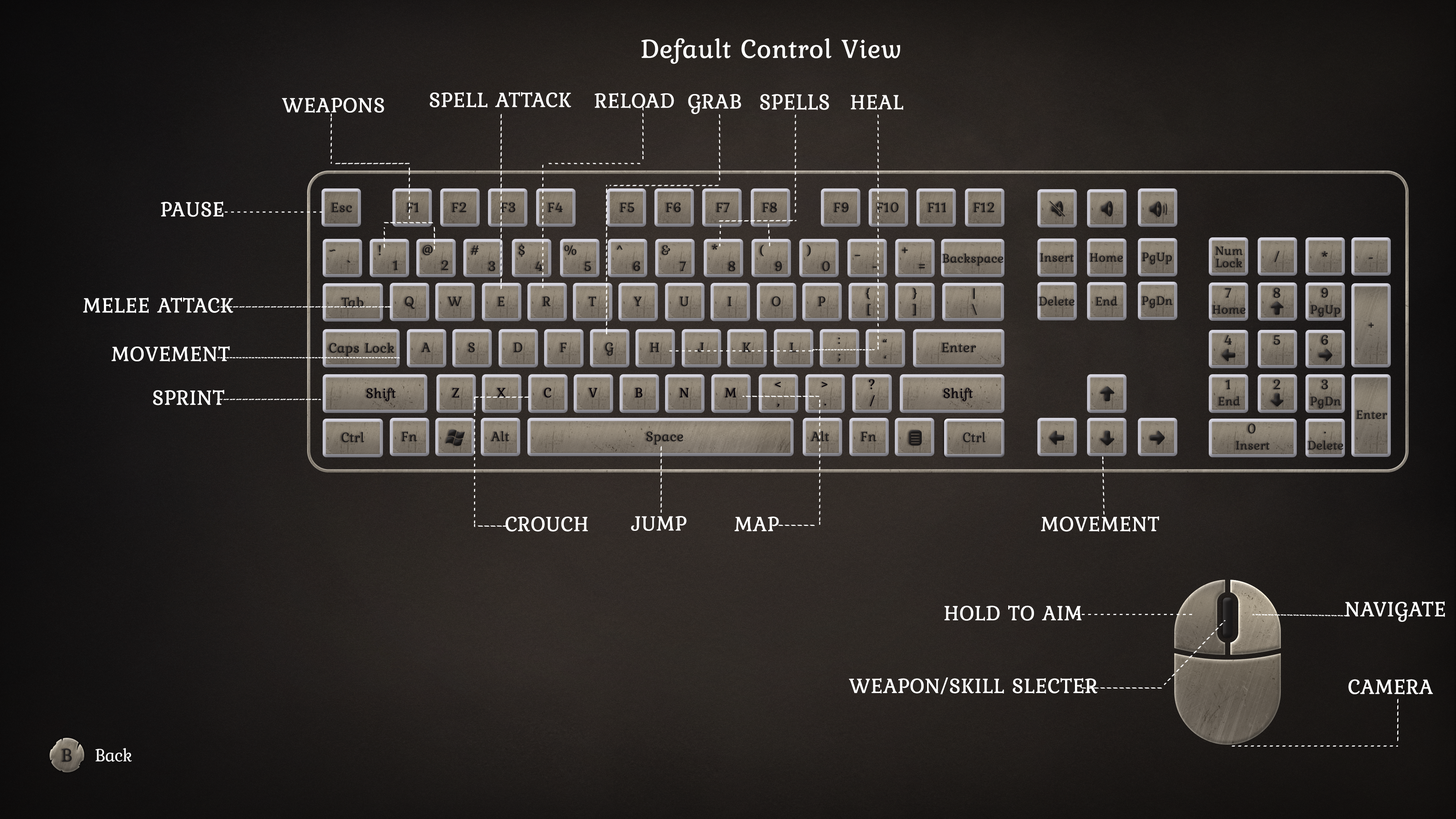
<style>
.page{position:relative;width:1456px;height:819px}
.page>*{position:absolute;margin:0}
.t1{font:27.3px "Kurale-Regular";color:#ffffff;font-weight:bold}
.t2{font:21.6px "Kurale-Regular";color:#ffffff;font-weight:bold}
.t3{font:22.8px "Kurale-Regular";color:#ffffff;font-weight:bold;scale:0.95 1}
.t4{font:14.2px "Kurale-Regular";color:#1e1c1c;font-weight:bold}
.t5{font:12.8px "Kurale-Regular";color:#1e1c1c;font-weight:bold}
.t6{font:12.8px/4.1px "Kurale-Regular";color:#1e1c1c;font-weight:bold}
.t7{font:14.2px "Kurale-Regular";color:#0a060c;font-weight:bold}
.t8{font:19.6px "Kurale-Regular";color:#201e1e;font-weight:bold}
.t9{font:18.2px "Kurale-Regular";letter-spacing:-0.02em;color:#ffffff}
</style>
<div class="page">
<p class="t1" style="left:641px;top:38px;width:259px;height:26px">Default Control View</p>
<p class="t2" style="left:282px;top:97px;width:102px;height:16px">WEAPONS</p>
<p class="t2" style="left:430px;top:92px;width:141px;height:16px">SPELL ATTACK</p>
<p class="t2" style="left:595px;top:93px;width:79px;height:15px">RELOAD</p>
<p class="t2" style="left:688px;top:94px;width:53px;height:20px">GRAB</p>
<p class="t3" style="left:760px;top:94px;width:69px;height:16px">SPELLS</p>
<p class="t2" style="left:850px;top:94px;width:53px;height:16px">HEAL</p>
<p class="t2" style="left:161px;top:201px;width:62px;height:16px">PAUSE</p>
<p class="t4" style="left:331px;top:202px;width:21px;height:11px">Esc</p>
<p class="t4" style="left:407px;top:202px;width:12px;height:10px">F1</p>
<p class="t4" style="left:452px;top:202px;width:14px;height:10px">F2</p>
<p class="t4" style="left:501px;top:202px;width:14px;height:10px">F3</p>
<p class="t4" style="left:548px;top:202px;width:15px;height:10px">F4</p>
<p class="t4" style="left:620px;top:202px;width:14px;height:10px">F5</p>
<p class="t4" style="left:666px;top:202px;width:15px;height:10px">F6</p>
<p class="t4" style="left:716px;top:202px;width:14px;height:10px">F7</p>
<p class="t4" style="left:762px;top:202px;width:15px;height:11px">F8</p>
<p class="t4" style="left:834px;top:202px;width:15px;height:10px">F9</p>
<p class="t4" style="left:877px;top:202px;width:22px;height:10px">F10</p>
<p class="t4" style="left:928px;top:202px;width:18px;height:10px">F11</p>
<p class="t4" style="left:974px;top:202px;width:21px;height:10px">F12</p>
<p class="t4" style="left:379px;top:245px;width:2px;height:11px">!</p>
<p class="t4" style="left:422px;top:245px;width:11px;height:10px">@</p>
<p class="t4" style="left:471px;top:245px;width:8px;height:10px">#</p>
<p class="t4" style="left:519px;top:243px;width:6px;height:14px">$</p>
<p class="t4" style="left:564px;top:245px;width:13px;height:10px">%</p>
<p class="t4" style="left:617px;top:245px;width:6px;height:5px">^</p>
<p class="t4" style="left:662px;top:245px;width:8px;height:10px">&amp;</p>
<p class="t4" style="left:712px;top:244px;width:6px;height:6px">*</p>
<p class="t4" style="left:760px;top:245px;width:4px;height:11px">(</p>
<p class="t4" style="left:807px;top:245px;width:4px;height:11px">)</p>
<p class="t4" style="left:329px;top:249px;width:7px;height:3px">~</p>
<p class="t4" style="left:855px;top:255px;width:5px;height:1px">_</p>
<p class="t4" style="left:902px;top:247px;width:6px;height:6px">+</p>
<p class="t5" style="left:942px;top:253px;width:61px;height:13px">Backspace</p>
<p class="t5" style="left:1040px;top:253px;width:34px;height:9px">Insert</p>
<p class="t5" style="left:1090px;top:253px;width:33px;height:9px">Home</p>
<p class="t5" style="left:1142px;top:252px;width:30px;height:13px">PgUp</p>
<p class="t6" style="left:1215px;top:246px;width:28px;height:22px;text-align:center">Num<br><br><br>Lock</p>
<p class="t4" style="left:1274px;top:251px;width:6px;height:11px">/</p>
<p class="t4" style="left:1322px;top:251px;width:6px;height:6px">*</p>
<p class="t4" style="left:1369px;top:257px;width:4px;height:2px">-</p>
<p class="t4" style="left:347px;top:260px;width:3px;height:3px">`</p>
<p class="t4" style="left:393px;top:260px;width:5px;height:10px">1</p>
<p class="t4" style="left:441px;top:260px;width:8px;height:10px">2</p>
<p class="t4" style="left:489px;top:261px;width:6px;height:10px">3</p>
<p class="t4" style="left:535px;top:261px;width:8px;height:10px">4</p>
<p class="t4" style="left:584px;top:261px;width:7px;height:10px">5</p>
<p class="t4" style="left:633px;top:261px;width:7px;height:10px">6</p>
<p class="t4" style="left:679px;top:261px;width:7px;height:10px">7</p>
<p class="t4" style="left:728px;top:261px;width:8px;height:10px">8</p>
<p class="t4" style="left:775px;top:261px;width:7px;height:10px">9</p>
<p class="t4" style="left:822px;top:261px;width:8px;height:10px">0</p>
<p class="t4" style="left:872px;top:266px;width:5px;height:2px">-</p>
<p class="t4" style="left:919px;top:264px;width:6px;height:4px">=</p>
<p class="t4" style="left:866px;top:287px;width:4px;height:13px">{</p>
<p class="t4" style="left:913px;top:287px;width:4px;height:13px">}</p>
<p class="t4" style="left:973px;top:288px;width:2px;height:11px">|</p>
<p class="t4" style="left:1225px;top:288px;width:7px;height:10px">7</p>
<p class="t4" style="left:1273px;top:287px;width:7px;height:11px">8</p>
<p class="t4" style="left:1321px;top:287px;width:7px;height:11px">9</p>
<p class="t2" style="left:83px;top:297px;width:150px;height:16px">MELEE ATTACK</p>
<p class="t4" style="left:342px;top:297px;width:22px;height:11px">Tab</p>
<p class="t4" style="left:405px;top:296px;width:10px;height:13px">Q</p>
<p class="t4" style="left:447px;top:297px;width:15px;height:9px">W</p>
<p class="t4" style="left:497px;top:296px;width:8px;height:11px">E</p>
<p class="t4" style="left:543px;top:296px;width:8px;height:10px">R</p>
<p class="t4" style="left:588px;top:296px;width:8px;height:10px">T</p>
<p class="t4" style="left:634px;top:297px;width:8px;height:9px">Y</p>
<p class="t4" style="left:679px;top:297px;width:10px;height:9px">U</p>
<p class="t4" style="left:728px;top:297px;width:4px;height:9px">I</p>
<p class="t4" style="left:772px;top:296px;width:9px;height:10px">O</p>
<p class="t4" style="left:818px;top:296px;width:7px;height:10px">P</p>
<p class="t4" style="left:868px;top:304px;width:3px;height:11px">[</p>
<p class="t4" style="left:913px;top:304px;width:3px;height:11px">]</p>
<p class="t4" style="left:972px;top:304px;width:5px;height:11px">\</p>
<p class="t5" style="left:1039px;top:296px;width:36px;height:10px">Delete</p>
<p class="t5" style="left:1095px;top:296px;width:23px;height:10px">End</p>
<p class="t5" style="left:1142px;top:296px;width:31px;height:12px">PgDn</p>
<p class="t5" style="left:1212px;top:305px;width:34px;height:9px">Home</p>
<p class="t5" style="left:1310px;top:305px;width:30px;height:12px">PgUp</p>
<p class="t5" style="left:1368px;top:322px;width:6px;height:6px">+</p>
<p class="t4" style="left:838px;top:337px;width:2px;height:7px">:</p>
<p class="t4" style="left:883px;top:339px;width:4px;height:3px">“</p>
<p class="t4" style="left:1224px;top:335px;width:8px;height:10px">4</p>
<p class="t4" style="left:1274px;top:335px;width:6px;height:10px">5</p>
<p class="t4" style="left:1321px;top:335px;width:7px;height:10px">6</p>
<p class="t2" style="left:111px;top:346px;width:119px;height:16px">MOVEMENT</p>
<p class="t4" style="left:329px;top:342px;width:66px;height:14px">Caps Lock</p>
<p class="t4" style="left:421px;top:342px;width:10px;height:10px">A</p>
<p class="t4" style="left:468px;top:342px;width:7px;height:10px">S</p>
<p class="t4" style="left:513px;top:342px;width:9px;height:10px">D</p>
<p class="t4" style="left:560px;top:342px;width:6px;height:10px">F</p>
<p class="t4" style="left:605px;top:342px;width:9px;height:14px">G</p>
<p class="t4" style="left:650px;top:342px;width:9px;height:10px">H</p>
<p class="t4" style="left:698px;top:342px;width:6px;height:10px">J</p>
<p class="t4" style="left:742px;top:342px;width:9px;height:10px">K</p>
<p class="t4" style="left:790px;top:342px;width:7px;height:11px">L</p>
<p class="t4" style="left:838px;top:354px;width:3px;height:8px">;</p>
<p class="t4" style="left:942px;top:342px;width:34px;height:11px">Enter</p>
<p class="t4" style="left:884px;top:355px;width:2px;height:4px">‘</p>
<p class="t2" style="left:153px;top:390px;width:71px;height:15px">SPRINT</p>
<p class="t7" style="left:366px;top:388px;width:30px;height:13px">Shift</p>
<p class="t7" style="left:452px;top:388px;width:8px;height:10px">Z</p>
<p class="t7" style="left:497px;top:388px;width:9px;height:9px">X</p>
<p class="t7" style="left:544px;top:388px;width:7px;height:10px">C</p>
<p class="t7" style="left:588px;top:388px;width:10px;height:9px">V</p>
<p class="t7" style="left:635px;top:388px;width:8px;height:10px">B</p>
<p class="t7" style="left:679px;top:388px;width:10px;height:9px">N</p>
<p class="t7" style="left:725px;top:388px;width:11px;height:9px">M</p>
<p class="t7" style="left:775px;top:381px;width:6px;height:7px">&lt;</p>
<p class="t7" style="left:822px;top:381px;width:6px;height:7px">&gt;</p>
<p class="t7" style="left:869px;top:379px;width:6px;height:10px">?</p>
<p class="t7" style="left:943px;top:388px;width:30px;height:13px">Shift</p>
<p class="t4" style="left:1225px;top:380px;width:5px;height:9px">1</p>
<p class="t4" style="left:1273px;top:379px;width:7px;height:10px">2</p>
<p class="t4" style="left:1321px;top:379px;width:7px;height:10px">3</p>
<p class="t7" style="left:870px;top:395px;width:5px;height:11px">/</p>
<p class="t5" style="left:1218px;top:396px;width:22px;height:10px">End</p>
<p class="t5" style="left:1310px;top:397px;width:31px;height:12px">PgDn</p>
<p class="t7" style="left:777px;top:403px;width:3px;height:4px">,</p>
<p class="t7" style="left:824px;top:403px;width:2px;height:3px">.</p>
<p class="t5" style="left:1356px;top:410px;width:31px;height:9px">Enter</p>
<p class="t4" style="left:1248px;top:424px;width:8px;height:10px">0</p>
<p class="t4" style="left:341px;top:432px;width:23px;height:10px">Ctrl</p>
<p class="t4" style="left:402px;top:431px;width:15px;height:10px">Fn</p>
<p class="t4" style="left:491px;top:431px;width:18px;height:10px">Alt</p>
<p class="t4" style="left:646px;top:431px;width:37px;height:14px">Space</p>
<p class="t4" style="left:811px;top:431px;width:18px;height:10px">Alt</p>
<p class="t4" style="left:861px;top:431px;width:16px;height:10px">Fn</p>
<p class="t4" style="left:963px;top:432px;width:23px;height:10px">Ctrl</p>
<p class="t4" style="left:1324px;top:431px;width:2px;height:3px">.</p>
<p class="t5" style="left:1236px;top:441px;width:34px;height:9px">Insert</p>
<p class="t5" style="left:1308px;top:440px;width:35px;height:10px">Delete</p>
<p class="t2" style="left:505px;top:516px;width:83px;height:16px">CROUCH</p>
<p class="t2" style="left:631px;top:516px;width:56px;height:15px">JUMP</p>
<p class="t2" style="left:734px;top:516px;width:45px;height:15px">MAP</p>
<p class="t2" style="left:1041px;top:516px;width:118px;height:16px">MOVEMENT</p>
<p class="t2" style="left:944px;top:605px;width:138px;height:16px">HOLD TO AIM</p>
<p class="t2" style="left:1345px;top:601px;width:100px;height:21px">NAVIGATE</p>
<p class="t2" style="left:849px;top:677px;width:248px;height:17px">WEAPON/SKILL SLECTER</p>
<p class="t2" style="left:1348px;top:679px;width:85px;height:16px">CAMERA</p>
<p class="t8" style="left:61px;top:748px;width:11px;height:14px">B</p>
<p class="t9" style="left:95px;top:748px;width:37px;height:14px">Back</p>
</div>
